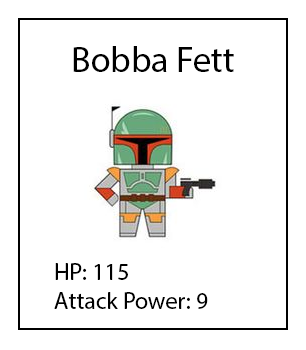
<style>
.page{position:relative;width:306px;height:350px;background:#ffffff}
.page>*{position:absolute;margin:0}
.t1{font:36px "MyriadPro-Regular";color:#000000}
.t2{font:24px "MyriadPro-Regular";color:#000000}
</style>
<div class="page">
<p class="t1" style="left:73px;top:46px;width:161px;height:26px">Bobba Fett</p>
<p class="t2" style="left:54px;top:263px;width:154px;height:46px">HP: 115<br>Attack Power: 9</p>
</div>
